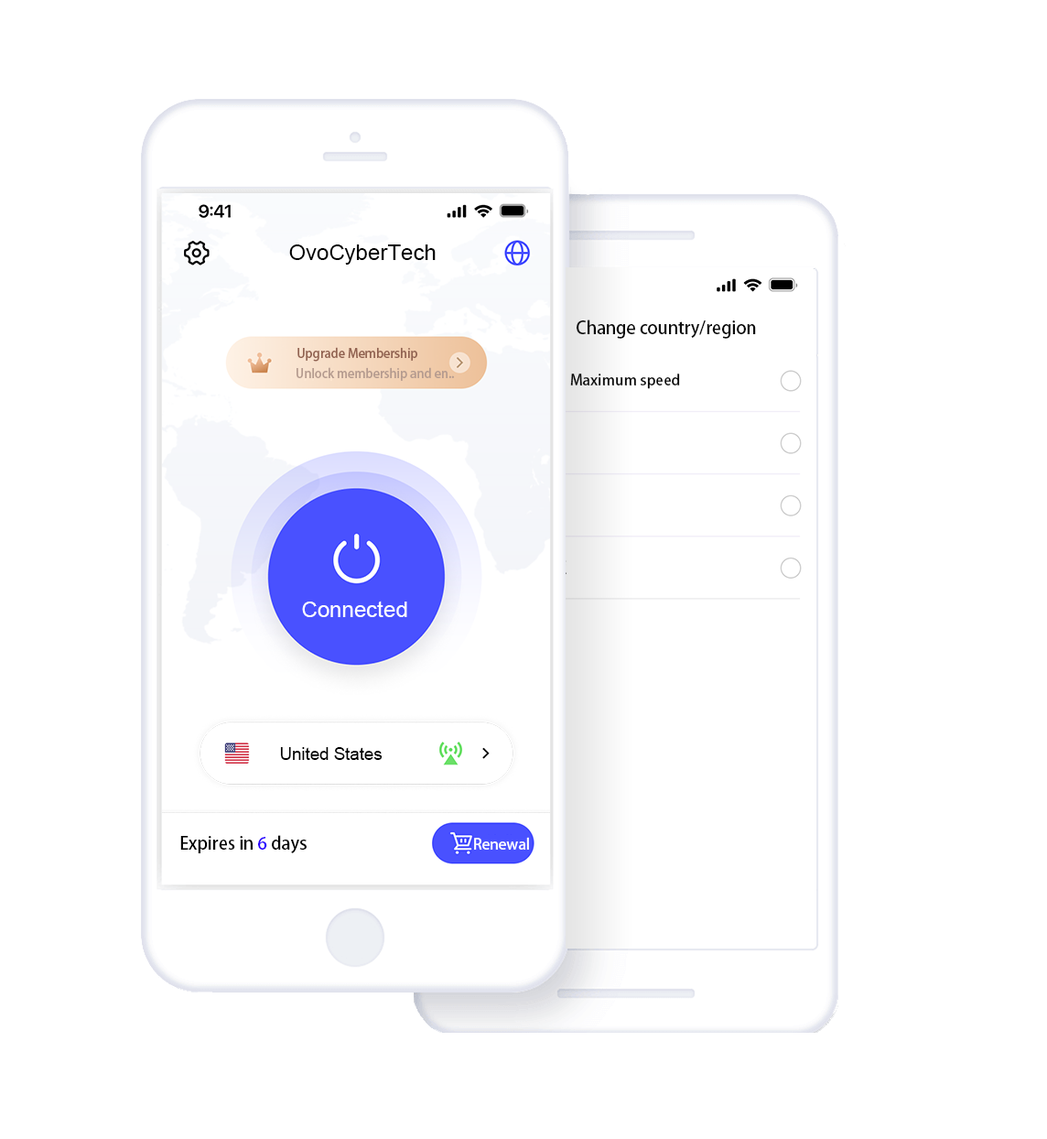
<style>
.page{position:relative;width:1047px;height:1139px;background:#ffffff}
.page>*{position:absolute;margin:0}
.t1{font:22px "ArialMT";color:#000000}
.t2{font:17.1px "AdobeHeitiStd-Regular";color:#0b0b0b}
.t3{font:12.2px "AdobeHeitiStd-Regular";color:#926351}
.t4{font:12.2px "AdobeHeitiStd-Regular";color:#b59b8f}
.t5{font:11px "AdobeHeitiStd-Regular";color:#0b0b0b}
.t6{font:22px "ArialMT";color:#ffffff}
.t7{font:17.1px "ArialMT";color:#000000}
.t8{font:17.1px "AdobeHeitiStd-Regular";color:#000000}
.t9{font:17.1px "AdobeHeitiStd-Regular";color:#2a00ff}
.t10{font:14.6px "AdobeHeitiStd-Regular";color:#ffffff}
</style>
<div class="page">
<p class="t1" style="left:289px;top:244px;width:147px;height:21px">OvoCyberTech</p>
<p class="t2" style="left:577px;top:319px;width:179px;height:20px">Change country/region</p>
<p class="t3" style="left:297px;top:347px;width:120px;height:15px">Upgrade Membership</p>
<p class="t4" style="left:297px;top:367px;width:157px;height:14px">Unlock membership and en..</p>
<p class="t5" style="left:570px;top:373px;width:110px;height:16px">Maximum speed</p>
<p class="t6" style="left:302px;top:600px;width:105px;height:17px">Connected</p>
<p class="t7" style="left:280px;top:747px;width:103px;height:13px">United States</p>
<p class="t8" style="left:180px;top:835px;width:127px;height:18px">Expires in <span class="t9">6 </span>days</p>
<p class="t10" style="left:474px;top:837px;width:55px;height:12px">Renewal</p>
</div>
